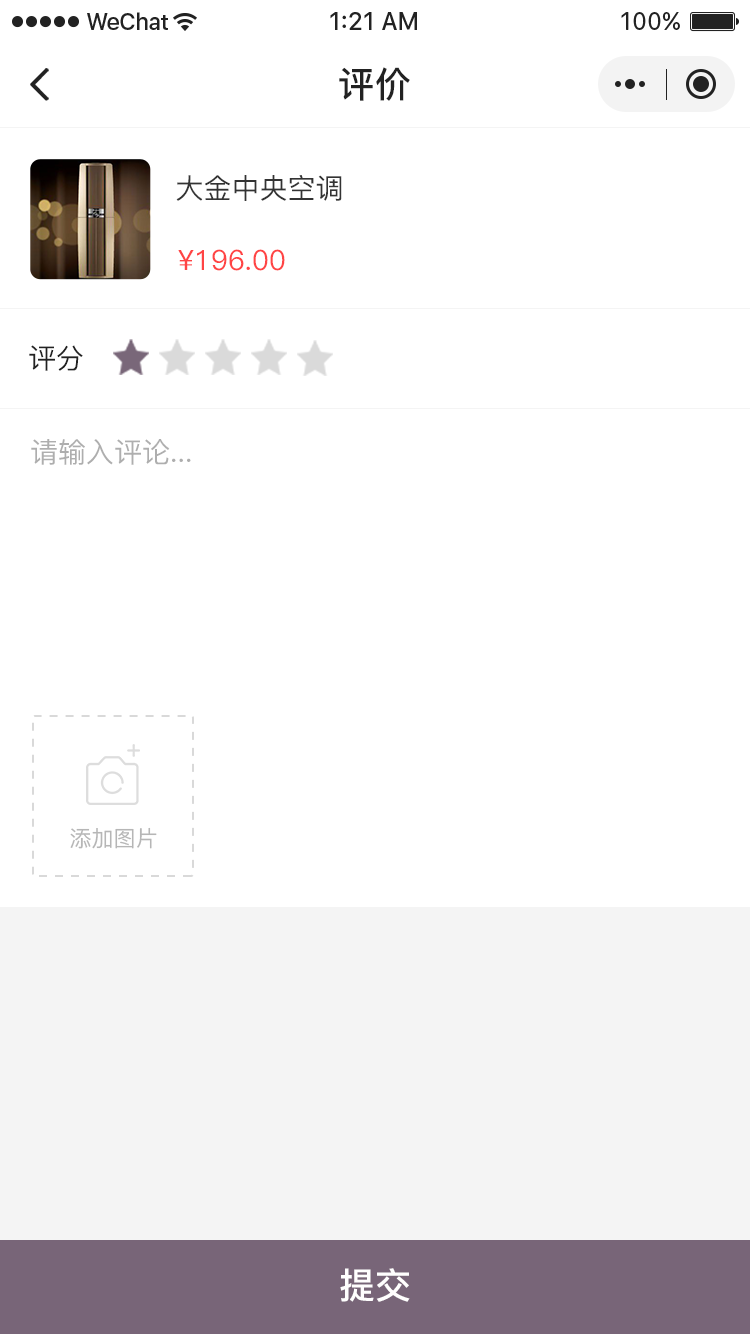
<style>
.page{position:relative;width:750px;height:1334px;background:#ffffff}
.page>*{position:absolute;margin:0}
.t1{font:36px "PingFang-SC-Bold";letter-spacing:0.028em;color:#222222}
.t2{font:28px "PingFang-SC-Medium";color:#333333}
.t3{font:28px "PingFang-SC-Medium";color:#ff4444;text-transform:uppercase}
.t4{font:28px "PingFang-SC-Medium";color:#222222}
.t5{font:28px "PingFang-SC-Medium";color:#aeaeae}
.t6{font:22px "PingFang-SC-Medium";color:#b6b6b6}
.t7{font:36px "PingFang-SC-Bold";color:#fffefe}
</style>
<div class="page">
<p class="t1" style="left:339px;top:67px;width:71px;height:34px">评价</p>
<p class="t2" style="left:176px;top:175px;width:166px;height:26px">大金中央空调</p>
<p class="t3" style="left:178px;top:249px;width:107px;height:22px">¥196.00</p>
<p class="t4" style="left:29px;top:345px;width:54px;height:26px">评分</p>
<p class="t5" style="left:31px;top:439px;width:160px;height:26px">请输入评论...</p>
<p class="t6" style="left:70px;top:827px;width:87px;height:22px">添加图片</p>
<p class="t7" style="left:340px;top:1268px;width:70px;height:34px">提交</p>
</div>
